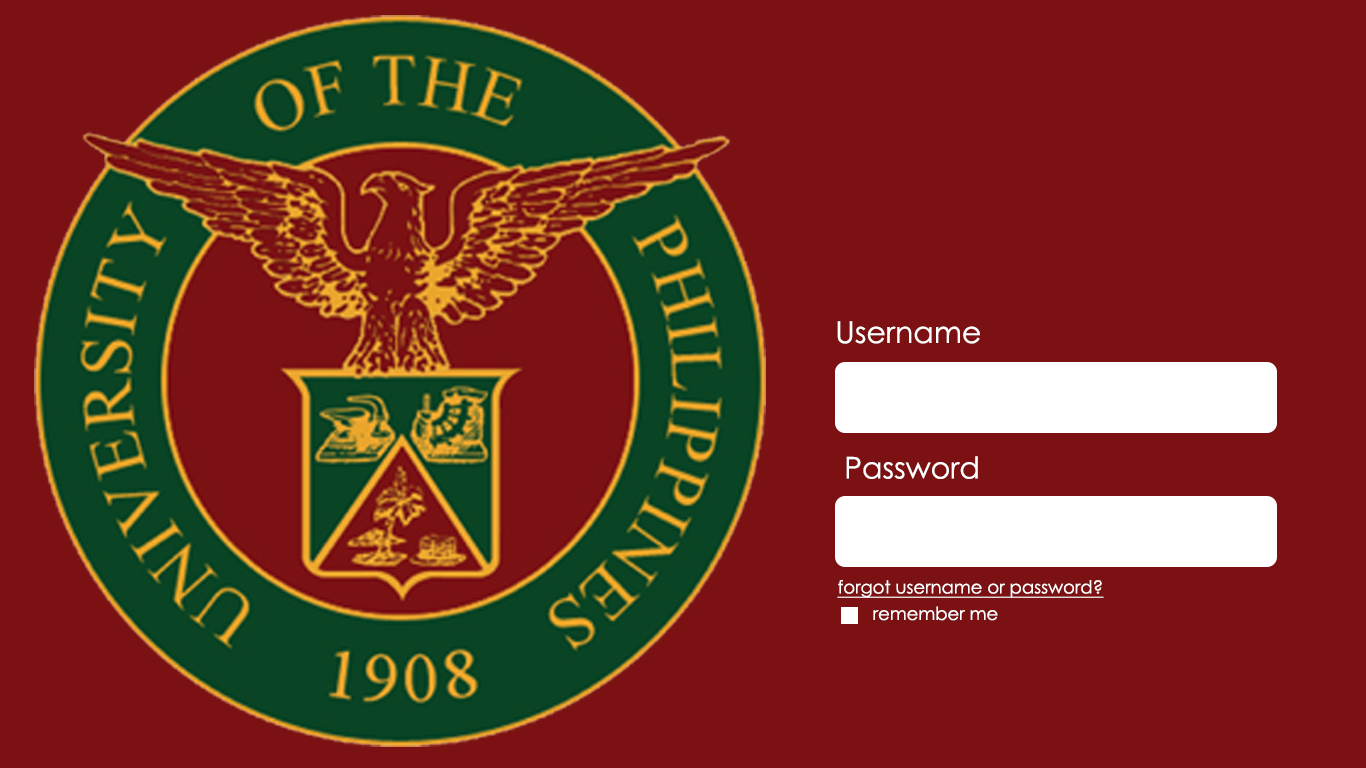
<style>
.page{position:relative;width:1366px;height:768px;background:#7b1113}
.page>*{position:absolute;margin:0}
.t1{font:30px "CenturyGothic";color:#ffffff}
.t2{font:18px "CenturyGothic";color:#ffffff;text-decoration:underline}
.t3{font:18px "CenturyGothic";color:#ffffff}
</style>
<div class="page">
<p class="t1" style="left:837px;top:321px;width:143px;height:23px">Username</p>
<p class="t1" style="left:846px;top:456px;width:132px;height:23px">Password</p>
<p class="t2" style="left:837px;top:580px;width:267px;height:18px">forgot username or password?</p>
<p class="t3" style="left:873px;top:606px;width:125px;height:15px">remember me</p>
</div>
